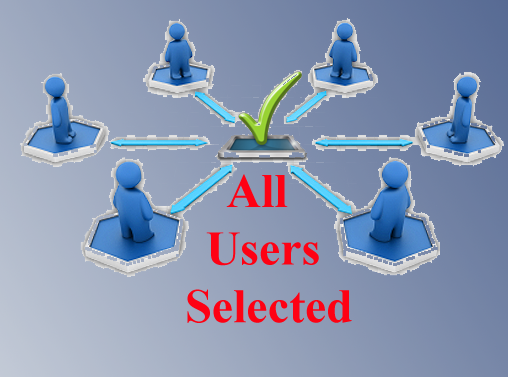
<style>
.page{position:relative;width:508px;height:377px}
.page>*{position:absolute;margin:0}
.t1{font:48px "TimesNewRomanPS-BoldMT";color:#fe0113}
</style>
<div class="page">
<p class="t1" style="left:187px;top:174px;width:165px;height:149px;text-align:center">All <br>Users<br> Selected</p>
</div>
